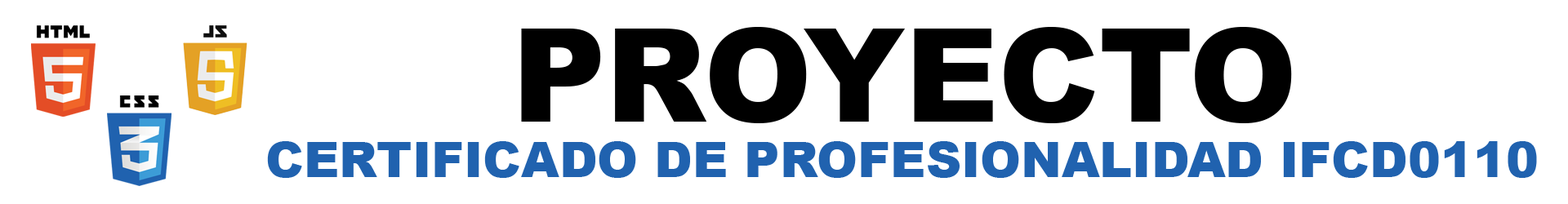
<style>
.page{position:relative;width:1568px;height:204px;background:#ffffff}
.page>*{position:absolute;margin:0}
.t1{font:129.8px "Arial-Black";color:#000000}
.t2{font:49px "Arial-Black";color:#2062af}
</style>
<div class="page">
<p class="t1" style="left:521px;top:27px;width:771px;height:96px">PROYECTO</p>
<p class="t2" style="left:267px;top:141px;width:1270px;height:37px">CERTIFICADO DE PROFESIONALIDAD IFCD0110</p>
</div>
